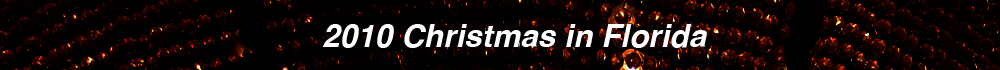
<style>
.page{position:relative;width:1000px;height:70px;background:#000000}
.page>*{position:absolute;margin:0}
.t1{font:31.6px "Helvetica-BoldOblique";color:#ffffff}
</style>
<div class="page">
<p class="t1" style="left:323px;top:24px;width:384px;height:24px">2010 Christmas in Florida</p>
</div>
